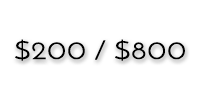
<style>
.page{position:relative;width:200px;height:96px;background:#ffffff}
.page>*{position:absolute;margin:0}
.t1{font:25px "JosefinSans";color:#000000;scale:1.21 1}
</style>
<div class="page">
<p class="t1" style="left:15px;top:39px;width:170px;height:22px">$200 / $800</p>
</div>
